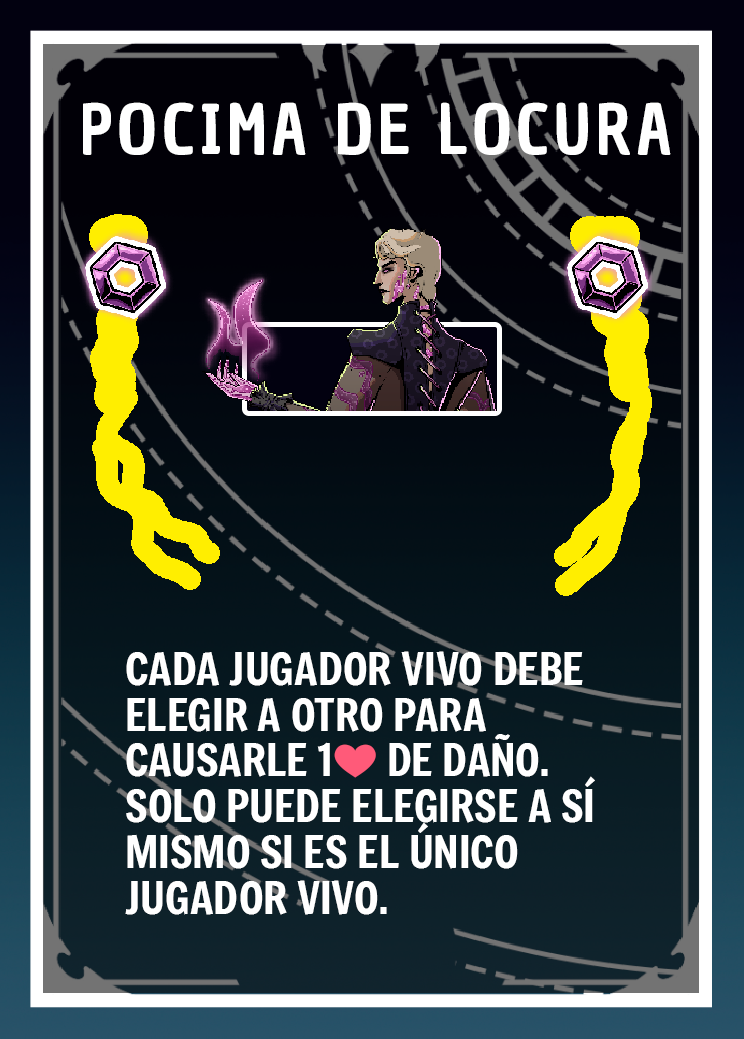
<style>
.page{position:relative;width:744px;height:1039px}
.page>*{position:absolute;margin:0}
.t1{font:66.7px "ChauPhilomeneOne-Regular";letter-spacing:0.075em;color:#ffffff}
.t2{font:43.7px/45.8px "Freeman-Regular";color:#ffffff}
.t3{font:43.7px/45.8px "EmojiOneColor";color:#ffffff}
</style>
<div class="page">
<p class="t1" style="left:83px;top:102px;width:588px;height:53px">POCIMA DE LOCURA</p>
<p class="t2" style="left:125px;top:651px;width:470px;height:264px">CADA JUGADOR VIVO DEBE ELEGIR A OTRO PARA CAUSARLE 1<span class="t3">❤️</span> DE DAÑO. <br>SOLO PUEDE ELEGIRSE A SÍ MISMO SI ES EL ÚNICO JUGADOR VIVO.</p>
</div>
